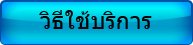
<style>
.page{position:relative;width:193px;height:45px}
.page>*{position:absolute;margin:0}
.t1{font:24px "Tahoma";color:#040404}
</style>
<div class="page">
<p class="t1" style="left:39px;top:10px;width:113px;height:19px">วิธีใช้บริการ</p>
</div>
